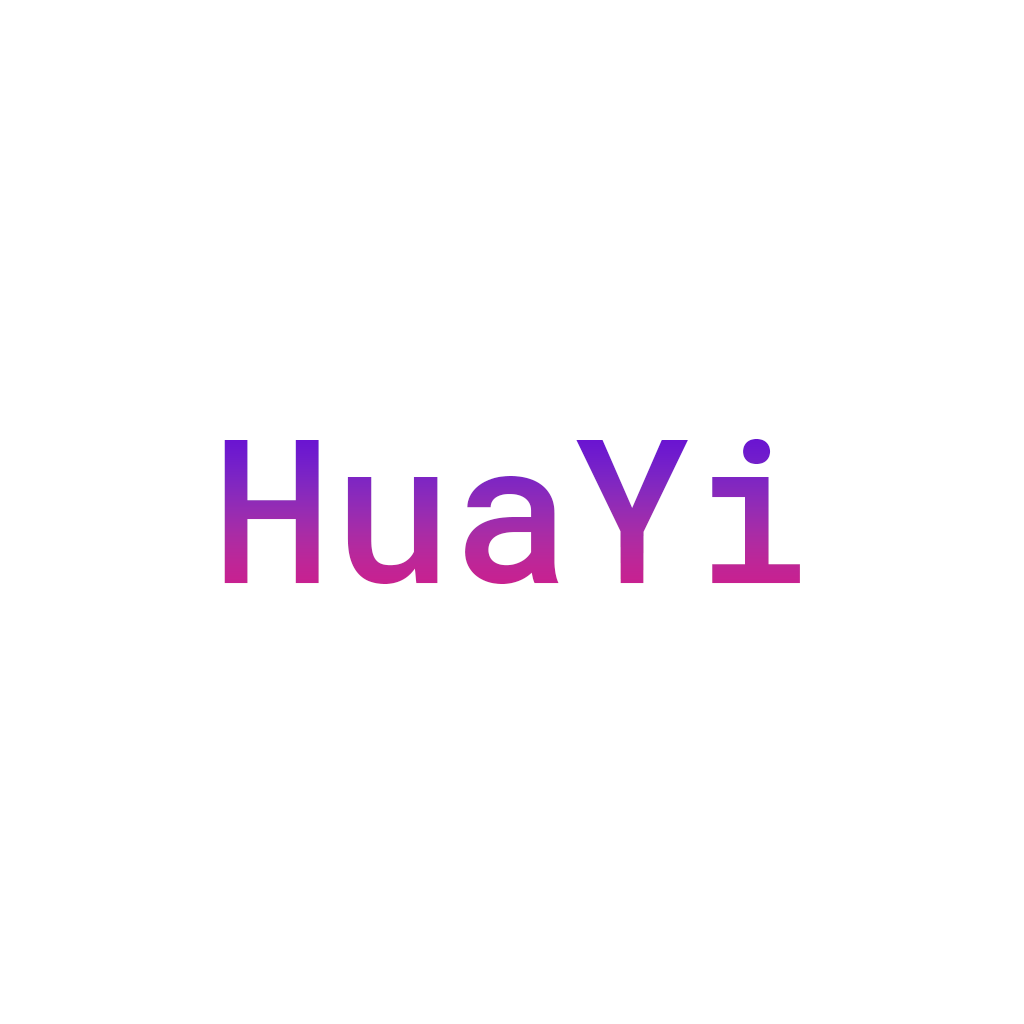
<style>
.page{position:relative;width:1024px;height:1024px;background:#ffffff}
.page>*{position:absolute;margin:0}
.t1{font:200px "RobotoMonoForPowerline-Medium"}
</style>
<div class="page">
<p class="t1" style="left:224px;top:439px;width:576px;height:145px">HuaYi</p>
</div>
